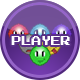
<style>
.page{position:relative;width:80px;height:80px;background:#ffffff}
.page>*{position:absolute;margin:0}
.t1{font:10px "Emulogic";color:#ffffff}
</style>
<div class="page">
<p class="t1" style="left:11px;top:36px;width:59px;height:9px">Player</p>
</div>
